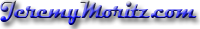
<style>
.page{position:relative;width:200px;height:29px;background:#ffffff}
.page>*{position:absolute;margin:0}
.t1{font:26.6px "Magneto-Bold";letter-spacing:-0.06em;scale:0.8 1}
</style>
<div class="page">
<p class="t1" style="left:0px;top:0px;width:197px;height:25px">JeremyMoritz.com</p>
</div>
